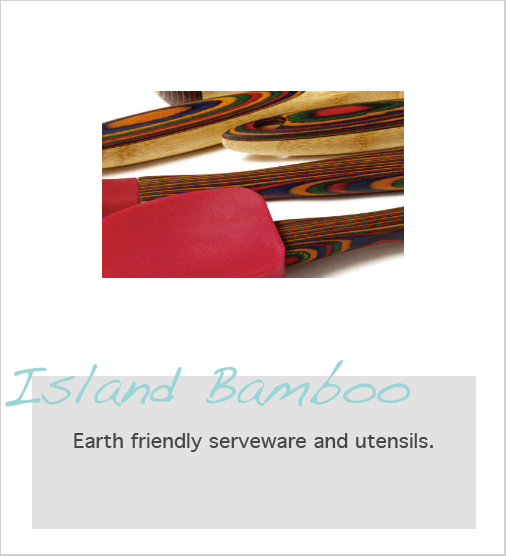
<style>
.page{position:relative;width:506px;height:556px;background:#ffffff}
.page>*{position:absolute;margin:0}
.t1{font:56px "Handwriting-Dakota";color:#9bd5d5}
.t2{font:20px "Geneva";color:#484743}
</style>
<div class="page">
<p class="t1" style="left:5px;top:360px;width:405px;height:47px">Island Bamboo</p>
<p class="t2" style="left:74px;top:433px;width:359px;height:19px">Earth friendly serveware and utensils.</p>
</div>
